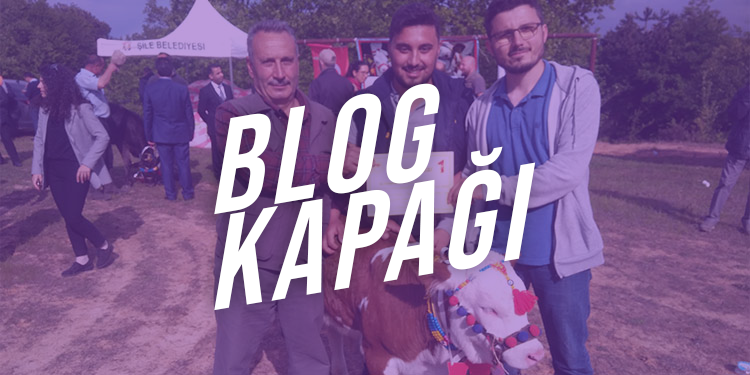
<style>
.page{position:relative;width:750px;height:375px}
.page>*{position:absolute;margin:0}
.t1{font:133.1px/32.1px "BebasNeue-Regular";letter-spacing:0.05em;color:#ffffff;font-style:italic}
</style>
<div class="page">
<p class="t1" style="left:214px;top:83px;width:322px;height:228px;text-align:right;rotate:-10deg">blog<br><br><br>kapağı</p>
</div>
